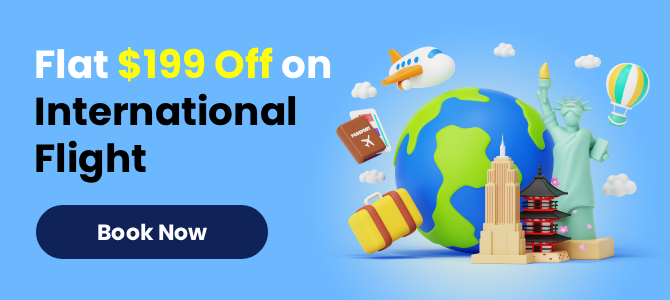
<style>
.page{position:relative;width:670px;height:300px;background:#6bb8ff}
.page>*{position:absolute;margin:0}
.t1{font:39px "Poppins-Bold";color:#000000}
.t2{font:39px "Poppins-Bold";color:#ffffff}
.t3{font:39px "Poppins-Bold";color:#fffe05}
.t4{font:22px "Poppins-Bold";color:#ffffff}
</style>
<div class="page">
<p class="t1" style="left:36px;top:47px;width:295px;height:136px"><span class="t2">Flat </span><span class="t3">$199 Off </span><span class="t2">on<br></span>International <br>Flight</p>
<p class="t4" style="left:98px;top:223px;width:109px;height:18px">Book Now</p>
</div>
